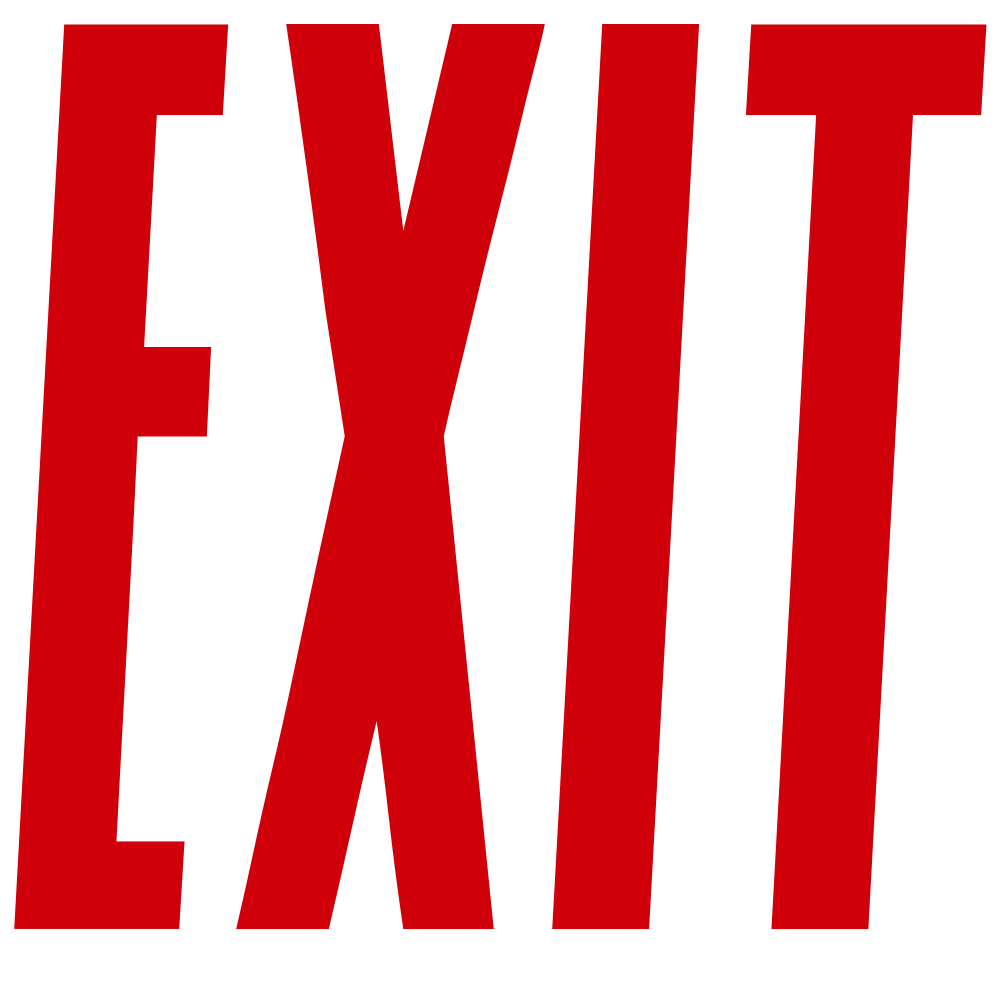
<style>
.page{position:relative;width:1000px;height:1000px;background:#ffffff}
.page>*{position:absolute;margin:0}
.t1{font:1005.4px "Sacco-SemBdExtCondObliq";color:#d0000a;scale:1.06 1}
</style>
<div class="page">
<p class="t1" style="left:14px;top:24px;width:973px;height:906px">exit</p>
</div>
